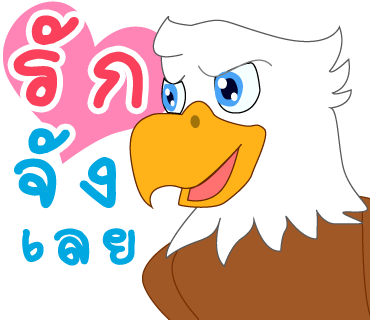
<style>
.page{position:relative;width:370px;height:320px;background:#ffffff}
.page>*{position:absolute;margin:0}
.t1{font:159px "2005_iannnnnMTV";letter-spacing:0.075em;color:#fa405a;scale:1.06 1}
.t2{font:140px "2005_iannnnnMTV";letter-spacing:0.05em;color:#00a8e1;scale:1.06 1}
.t3{font:101px "2005_iannnnnMTV";letter-spacing:0.075em;color:#00a8e1;scale:1.06 1}
</style>
<div class="page">
<p class="t1" style="left:13px;top:15px;width:130px;height:94px">รัก</p>
<p class="t2" style="left:14px;top:128px;width:102px;height:81px">จัง</p>
<p class="t3" style="left:22px;top:228px;width:113px;height:38px">เลย</p>
</div>
